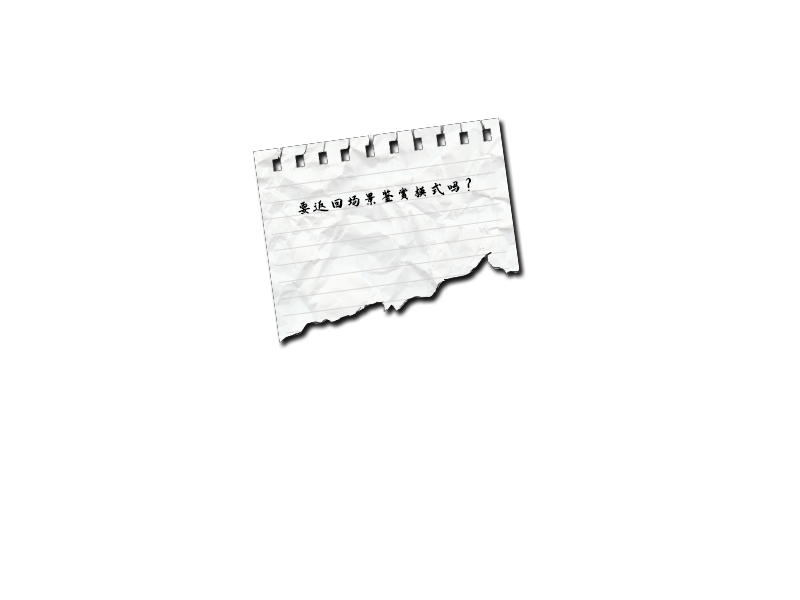
<style>
.page{position:relative;width:800px;height:600px;background:#ffffff}
.page>*{position:absolute;margin:0}
.t1{font:18.8px "slideyouran-Regular";color:#000000}
</style>
<div class="page">
<p class="t1" style="left:298px;top:177px;width:173px;height:37px;rotate:-8deg">要返回场景鉴赏模式吗?</p>
</div>
